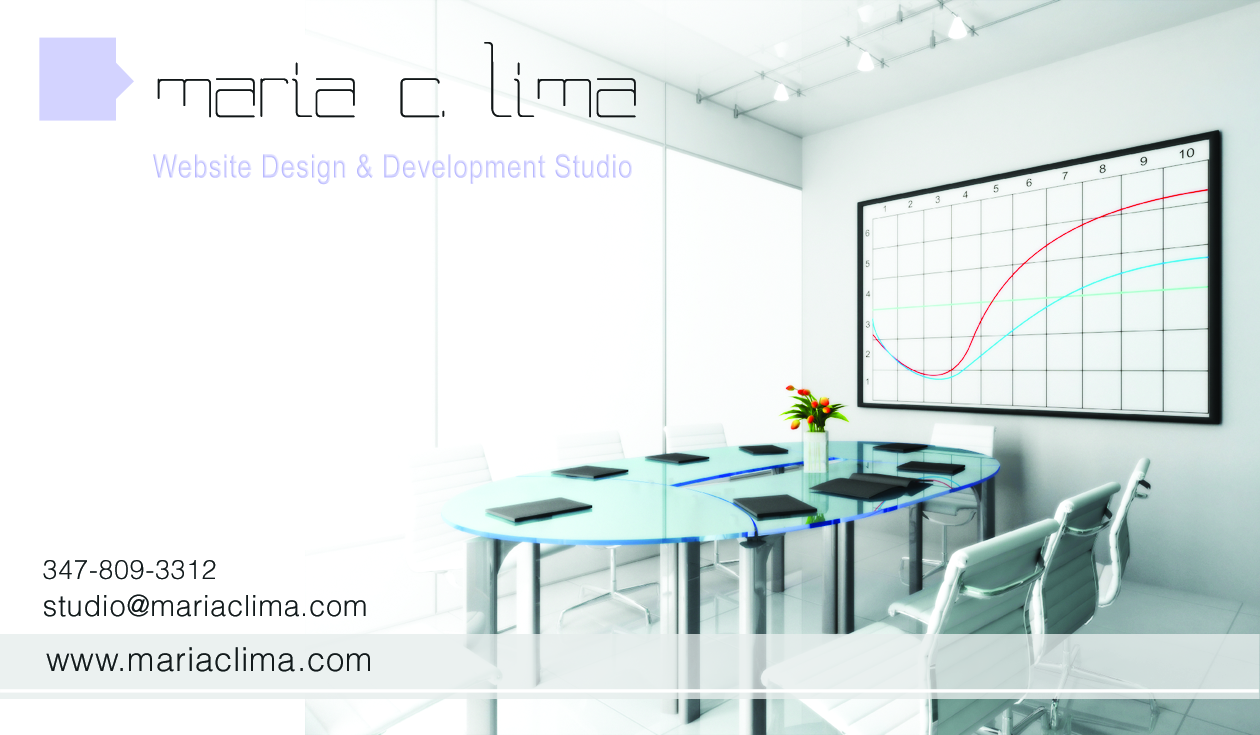
<style>
.page{position:relative;width:1260px;height:735px;background:#ffffff}
.page>*{position:absolute;margin:0}
.t1{font:150px "Nada-Regular";color:#121617}
.t2{font:32.1px "ArialNarrow";letter-spacing:0.025em;color:#d3d3ff}
.t3{font:26.7px "Myriad-Roman";letter-spacing:0.025em;color:#d3d3ff}
.t4{font:29.2px/37.5px "HelveticaLTStd-Light";letter-spacing:0.025em;color:#131a1b}
.t5{font:26.7px/37.5px "HelveticaLTStd-Light";letter-spacing:0.025em;color:#131a1b}
.t6{font:32.9px "HelveticaLTStd-Light";letter-spacing:0.025em;color:#131a1b}
</style>
<div class="page">
<p class="t1" style="left:157px;top:42px;width:479px;height:76px">maria c. lima</p>
<p class="t2" style="left:153px;top:153px;width:479px;height:32px"><span class="t3"><br></span>Website Design &amp; Development Studio</p>
<p class="t4" style="left:43px;top:560px;width:323px;height:57px"><span class="t5">347-809-3312<br></span>studio@mariaclima.com</p>
<p class="t6" style="left:46px;top:647px;width:324px;height:25px">www.mariaclima.com</p>
</div>
